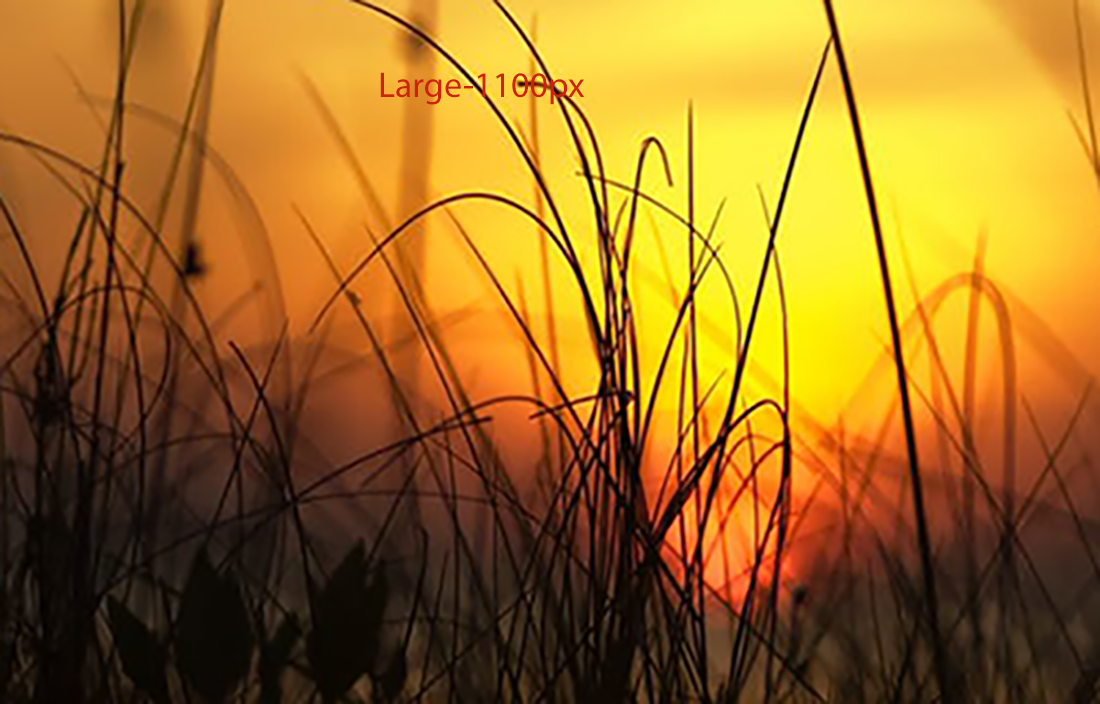
<style>
.page{position:relative;width:1100px;height:704px}
.page>*{position:absolute;margin:0}
.t1{font:36px "MyriadPro-Regular";color:#d0200e}
</style>
<div class="page">
<p class="t1" style="left:380px;top:72px;width:205px;height:33px">Large-1100px</p>
</div>
